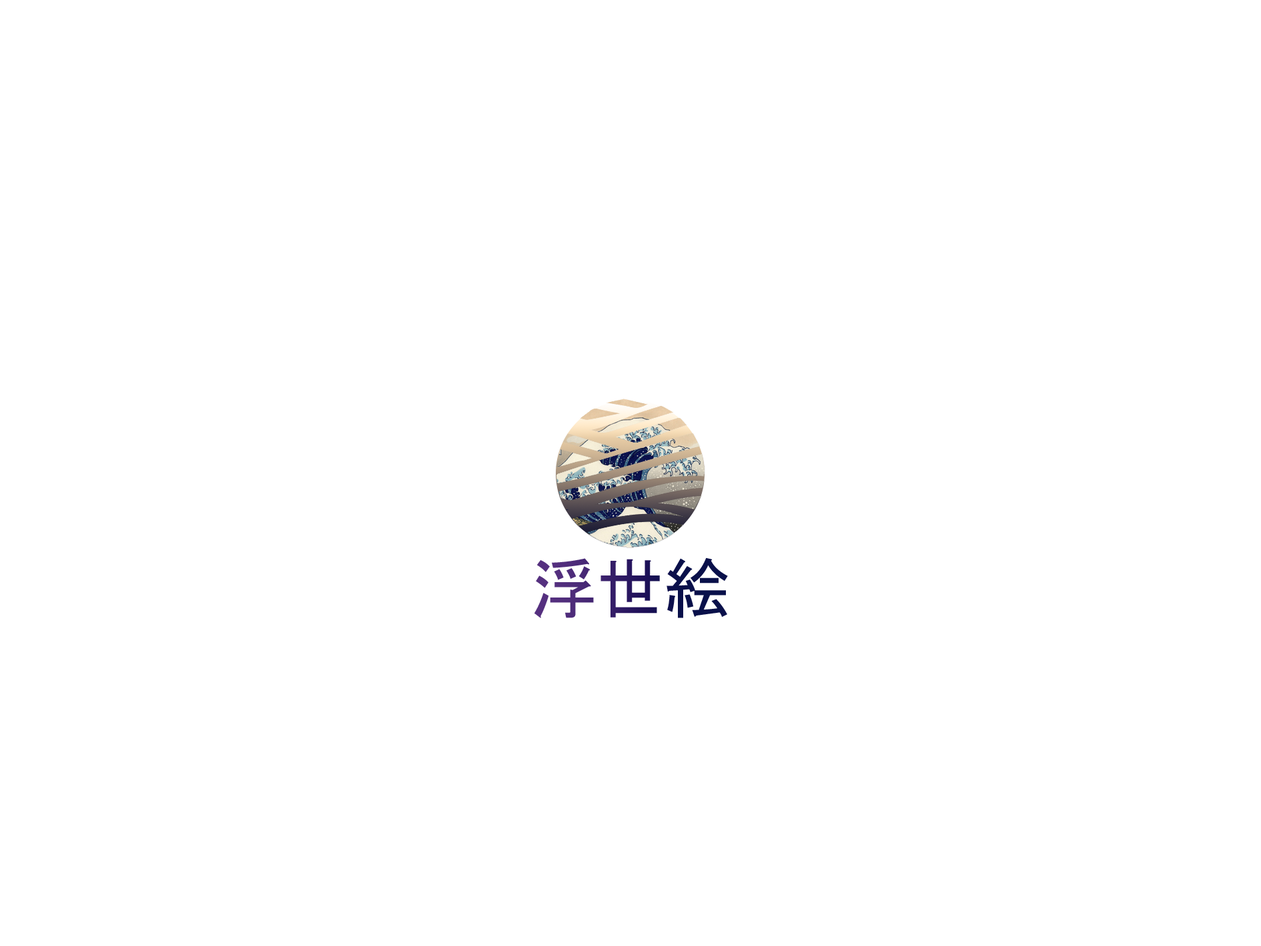
<style>
.page{position:relative;width:1261px;height:946px;background:#ffffff}
.page>*{position:absolute;margin:0}
.t1{font:66.7px "MS-PGothic"}
</style>
<div class="page">
<p class="t1" style="left:534px;top:557px;width:194px;height:61px">浮世絵</p>
</div>
